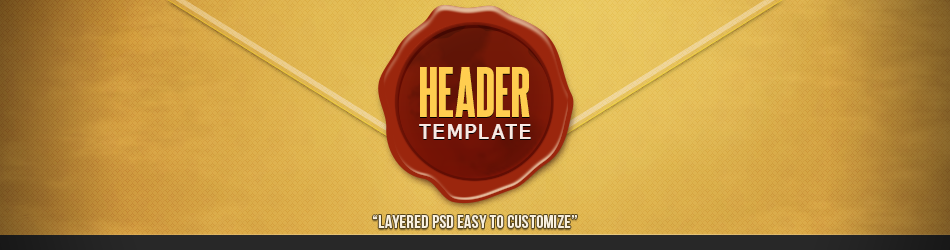
<style>
.page{position:relative;width:950px;height:250px}
.page>*{position:absolute;margin:0}
.t1{font:61px "SteelfishEb-Regular";color:#ffcd4f}
.t2{font:20.3px "GogatingBook-ExtraBold";letter-spacing:0.1em;color:#f9e9e3}
.t3{font:18px "BebasNeue";letter-spacing:0.02em;color:#f8f0df}
</style>
<div class="page">
<p class="t1" style="left:420px;top:67px;width:110px;height:50px">HEADER</p>
<p class="t2" style="left:419px;top:124px;width:112px;height:15px">TEMPLATE</p>
<p class="t3" style="left:372px;top:215px;width:205px;height:13px">“Layered PSD easy to customize”</p>
</div>
